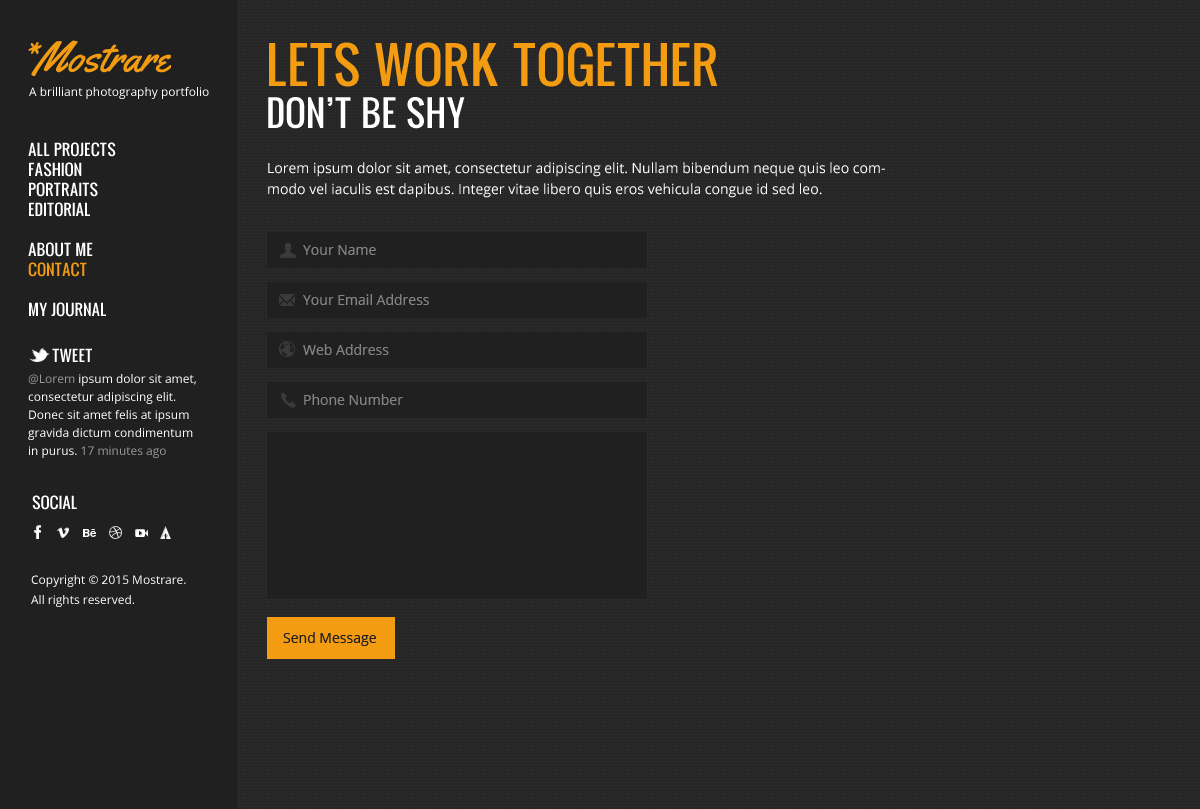
<style>
.page{position:relative;width:1200px;height:809px;background:#202020}
.page>*{position:absolute;margin:0}
.t1{font:42.7px "Yellowtail";color:#f39c12}
.t2{font:49px/42px "Oswald";color:#f39c12;text-transform:uppercase}
.t3{font:35px/42px "Oswald";color:#ffffff;text-transform:uppercase}
.t4{font:12px "OpenSans";color:#ffffff}
.t5{font:15.1px/20px "Oswald";color:#ffffff;text-transform:uppercase}
.t6{font:15.1px/20px "Oswald";color:#f39c12;text-transform:uppercase}
.t7{font:14px/21px "OpenSans";color:#ffffff}
.t8{font:14px "OpenSans";color:#848484}
.t9{font:15.1px "Oswald";color:#ffffff;text-transform:uppercase}
.t10{font:12px/18px "OpenSans";color:#ffffff}
.t11{font:12px/18px "OpenSans";color:#999999}
.t12{font:12px/20px "OpenSans";color:#ffffff}
.t13{font:14px "OpenSans";color:#202020}
</style>
<div class="page">
<p class="t1" style="left:28px;top:40px;width:144px;height:37px">*Mostrare</p>
<p class="t2" style="left:268px;top:42px;width:450px;height:87px">Lets work together<br><span class="t3">Don’t be Shy</span></p>
<p class="t4" style="left:29px;top:87px;width:180px;height:12px">A brilliant photography portfolio</p>
<p class="t5" style="left:28px;top:142px;width:88px;height:175px">All Projects<br>Fashion<br>Portraits<br>Editorial<br><br>About Me<br><span class="t6">Contact<br></span><br>My Journal</p>
<p class="t7" style="left:268px;top:162px;width:617px;height:36px">Lorem ipsum dolor sit amet, consectetur adipiscing elit. Nullam bibendum neque quis leo commodo vel iaculis est dapibus. Integer vitae libero quis eros vehicula congue id sed leo.</p>
<p class="t8" style="left:303px;top:245px;width:73px;height:10px">Your Name</p>
<p class="t8" style="left:303px;top:294px;width:126px;height:11px">Your Email Address</p>
<p class="t9" style="left:52px;top:348px;width:40px;height:14px">Tweet</p>
<p class="t8" style="left:303px;top:344px;width:86px;height:11px">Web Address</p>
<p class="t10" style="left:28px;top:374px;width:168px;height:84px"><span class="t11">@Lorem</span> ipsum dolor sit amet, consectetur adipiscing elit. Donec sit amet felis at ipsum gravida dictum condimentum in purus. <span class="t11">17 minutes ago</span></p>
<p class="t8" style="left:304px;top:394px;width:99px;height:11px">Phone Number</p>
<p class="t9" style="left:32px;top:495px;width:45px;height:15px">Social</p>
<p class="t12" style="left:31px;top:575px;width:155px;height:32px">Copyright © 2015 Mostrare.<br>All rights reserved.</p>
<p class="t13" style="left:283px;top:632px;width:93px;height:14px">Send Message</p>
</div>
